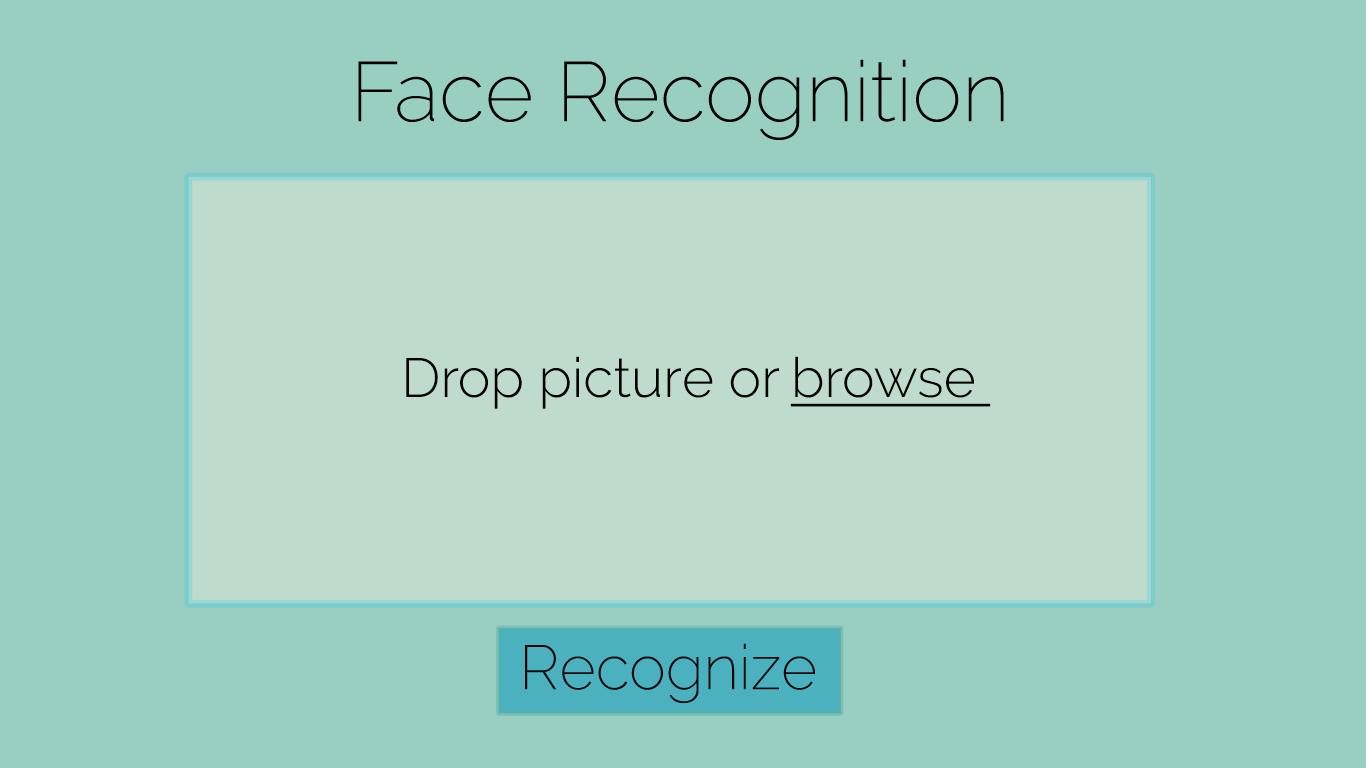
<style>
.page{position:relative;width:1366px;height:768px;background:#99cec3}
.page>*{position:absolute;margin:0}
.t1{font:84.2px "Raleway-ExtraLight";color:#000000}
.t2{font:55.1px "Raleway-Light";color:#000000}
.t3{font:55.1px "Raleway-Light";color:#000000;text-decoration:underline}
.t4{font:62.2px "Raleway-ExtraLight";color:#000000}
</style>
<div class="page">
<p class="t1" style="left:358px;top:59px;width:646px;height:81px">Face Recognition</p>
<p class="t2" style="left:406px;top:356px;width:373px;height:53px">Drop picture or</p>
<p class="t3" style="left:790px;top:356px;width:201px;height:51px">browse</p>
<p class="t4" style="left:525px;top:643px;width:290px;height:61px">Recognize</p>
</div>
